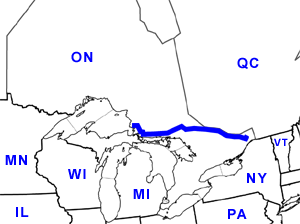
<style>
.page{position:relative;width:300px;height:224px;background:#ffffff}
.page>*{position:absolute;margin:0}
.t1{font:14px "Arial-BoldMT";letter-spacing:0.1em;color:#0000ff}
.t2{font:10px "Arial-BoldMT";letter-spacing:0.1em;color:#0000ff}
</style>
<div class="page">
<p class="t1" style="left:71px;top:51px;width:22px;height:12px">ON</p>
<p class="t1" style="left:237px;top:57px;width:22px;height:12px">QC</p>
<p class="t2" style="left:274px;top:138px;width:14px;height:8px">VT</p>
<p class="t1" style="left:5px;top:155px;width:22px;height:10px">MN</p>
<p class="t1" style="left:68px;top:169px;width:18px;height:10px">WI</p>
<p class="t1" style="left:247px;top:173px;width:20px;height:10px">NY</p>
<p class="t1" style="left:133px;top:189px;width:16px;height:10px">MI</p>
<p class="t1" style="left:16px;top:207px;width:13px;height:10px">IL</p>
<p class="t1" style="left:228px;top:209px;width:19px;height:10px">PA</p>
</div>
